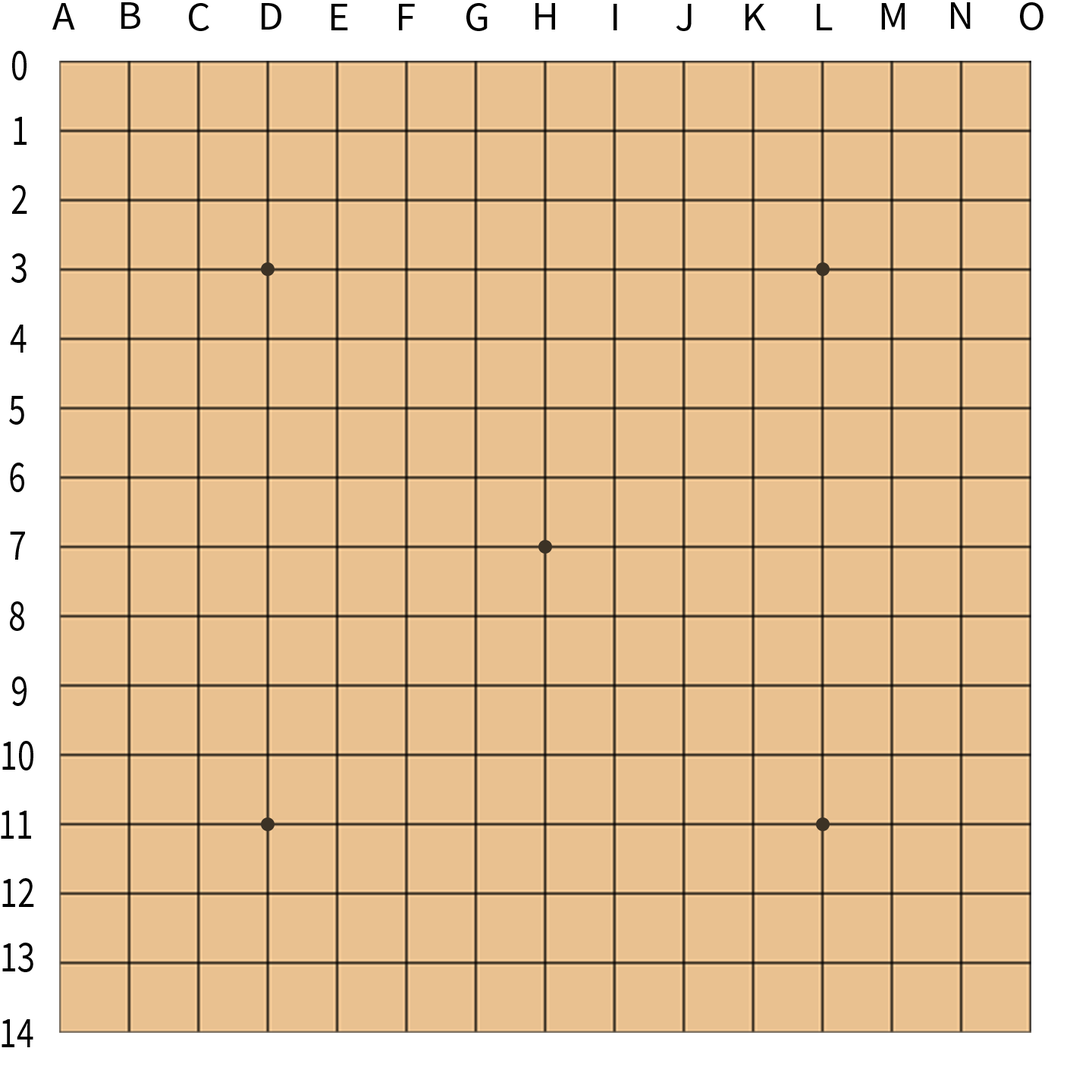
<style>
.page{position:relative;width:1092px;height:1092px;background:#e9c190}
.page>*{position:absolute;margin:0}
.t1{font:36px "SourceHanSansSC-Regular";color:#000000;scale:1.03 1}
.t2{font:39.3px "SourceHanSansSC-Regular";color:#000000;scale:0.8 1}
</style>
<div class="page">
<p class="t1" style="left:52px;top:3px;width:23px;height:27px">A</p>
<p class="t1" style="left:121px;top:2px;width:19px;height:27px">B</p>
<p class="t1" style="left:189px;top:3px;width:20px;height:28px">C</p>
<p class="t1" style="left:262px;top:3px;width:19px;height:27px">D</p>
<p class="t1" style="left:331px;top:4px;width:17px;height:26px">E</p>
<p class="t1" style="left:399px;top:4px;width:16px;height:26px">F</p>
<p class="t1" style="left:466px;top:3px;width:22px;height:28px">G</p>
<p class="t1" style="left:535px;top:3px;width:20px;height:27px">H</p>
<p class="t1" style="left:613px;top:4px;width:4px;height:26px">I</p>
<p class="t1" style="left:676px;top:4px;width:16px;height:27px">J</p>
<p class="t1" style="left:745px;top:4px;width:21px;height:26px">K</p>
<p class="t1" style="left:817px;top:4px;width:16px;height:26px">L</p>
<p class="t1" style="left:881px;top:3px;width:24px;height:27px">M</p>
<p class="t1" style="left:951px;top:2px;width:20px;height:27px">N</p>
<p class="t1" style="left:1020px;top:2px;width:23px;height:28px">O</p>
<p class="t2" style="left:12px;top:51px;width:15px;height:29px">0</p>
<p class="t2" style="left:14px;top:117px;width:13px;height:28px">1</p>
<p class="t2" style="left:12px;top:185px;width:15px;height:29px">2</p>
<p class="t2" style="left:11px;top:253px;width:16px;height:30px">3</p>
<p class="t2" style="left:10px;top:325px;width:17px;height:28px">4</p>
<p class="t2" style="left:9px;top:396px;width:15px;height:29px">5</p>
<p class="t2" style="left:10px;top:463px;width:14px;height:29px">6</p>
<p class="t2" style="left:10px;top:532px;width:15px;height:28px">7</p>
<p class="t2" style="left:10px;top:601px;width:14px;height:30px">8</p>
<p class="t2" style="left:12px;top:676px;width:15px;height:30px">9</p>
<p class="t2" style="left:2px;top:741px;width:31px;height:29px">10</p>
<p class="t2" style="left:1px;top:811px;width:30px;height:28px">11</p>
<p class="t2" style="left:2px;top:878px;width:32px;height:29px">12</p>
<p class="t2" style="left:2px;top:943px;width:31px;height:29px">13</p>
<p class="t2" style="left:2px;top:1019px;width:31px;height:28px">14</p>
</div>
